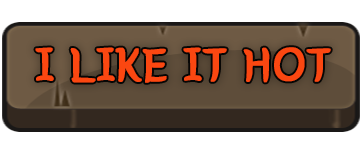
<style>
.page{position:relative;width:360px;height:150px;background:#ffffff}
.page>*{position:absolute;margin:0}
.t1{font:50.3px "BMYEONSUNG";color:#fb4711;text-transform:uppercase;font-weight:bold}
</style>
<div class="page">
<p class="t1" style="left:35px;top:47px;width:296px;height:36px">I LIKE IT HOT</p>
</div>
